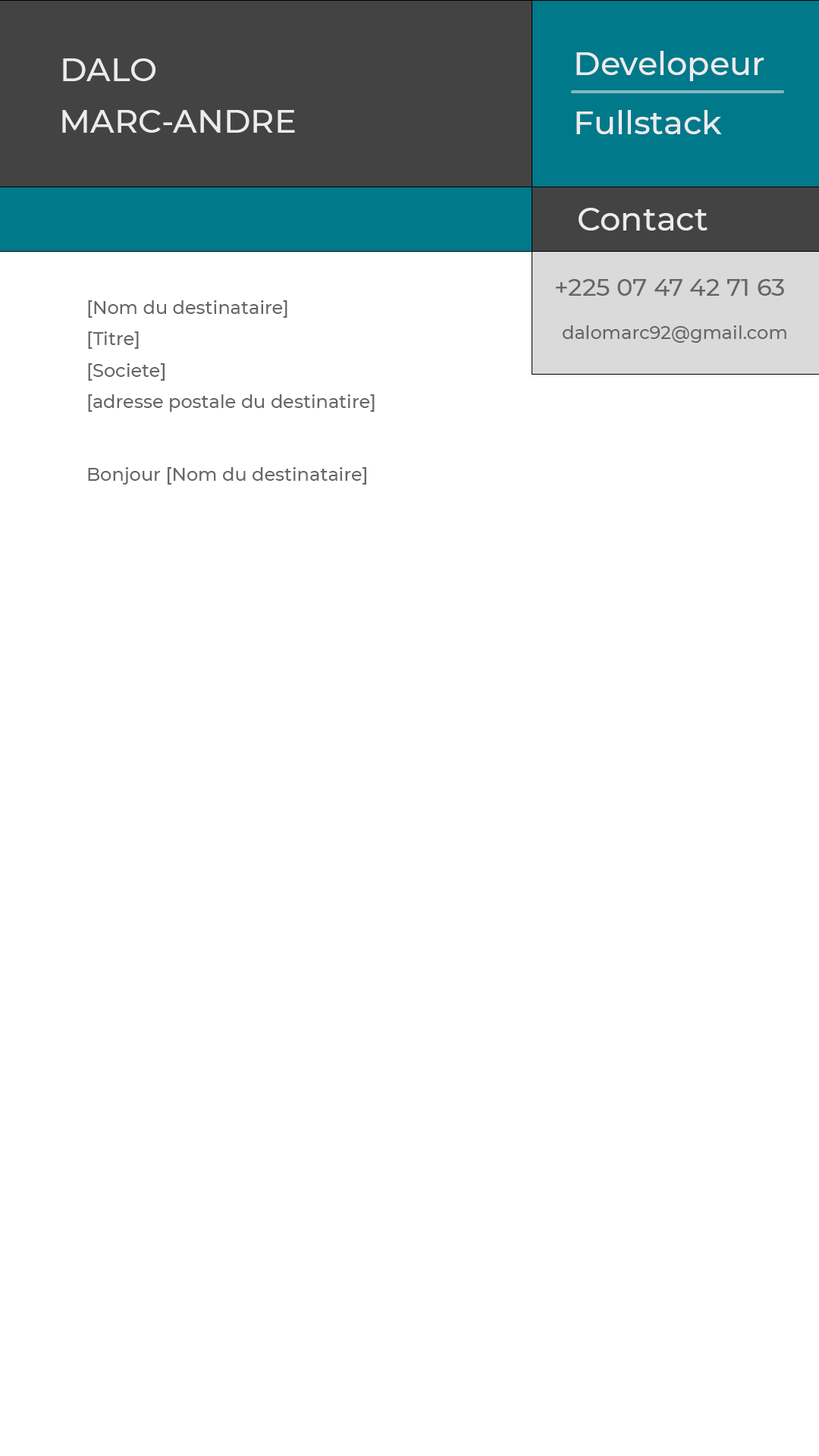
<style>
.page{position:relative;width:819px;height:1456px;background:#ffffff}
.page>*{position:absolute;margin:0}
.t1{font:32.6px "Montserrat-Medium";color:#ececec}
.t2{font:24.3px "Montserrat-Medium";color:#666666}
.t3{font:18.2px "Montserrat-Medium";color:#666666}
</style>
<div class="page">
<p class="t1" style="left:576px;top:51px;width:188px;height:30px">Developeur</p>
<p class="t1" style="left:63px;top:58px;width:93px;height:23px">DALO</p>
<p class="t1" style="left:62px;top:110px;width:233px;height:23px">MARC-ANDRE</p>
<p class="t1" style="left:576px;top:110px;width:146px;height:24px">Fullstack</p>
<p class="t1" style="left:579px;top:208px;width:129px;height:23px">Contact</p>
<p class="t2" style="left:556px;top:279px;width:228px;height:17px">+225 07 47 42 71 63</p>
<p class="t3" style="left:88px;top:300px;width:199px;height:18px">[Nom du destinataire]</p>
<p class="t3" style="left:563px;top:325px;width:223px;height:18px">dalomarc92@gmail.com</p>
<p class="t3" style="left:88px;top:331px;width:51px;height:18px">[Titre]</p>
<p class="t3" style="left:88px;top:363px;width:77px;height:18px">[Societe]</p>
<p class="t3" style="left:88px;top:394px;width:287px;height:18px">[adresse postale du destinatire]</p>
<p class="t3" style="left:88px;top:467px;width:278px;height:18px">Bonjour [Nom du destinataire]</p>
</div>
